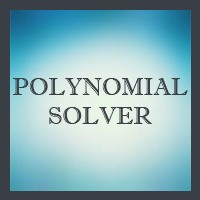
<style>
.page{position:relative;width:200px;height:200px}
.page>*{position:absolute;margin:0}
.t1{font:24px "ImprintMT-Shadow";color:#3a3e45}
</style>
<div class="page">
<p class="t1" style="left:13px;top:78px;width:175px;height:46px;text-align:center">POLYNOMIAL<br>SOLVER</p>
</div>
